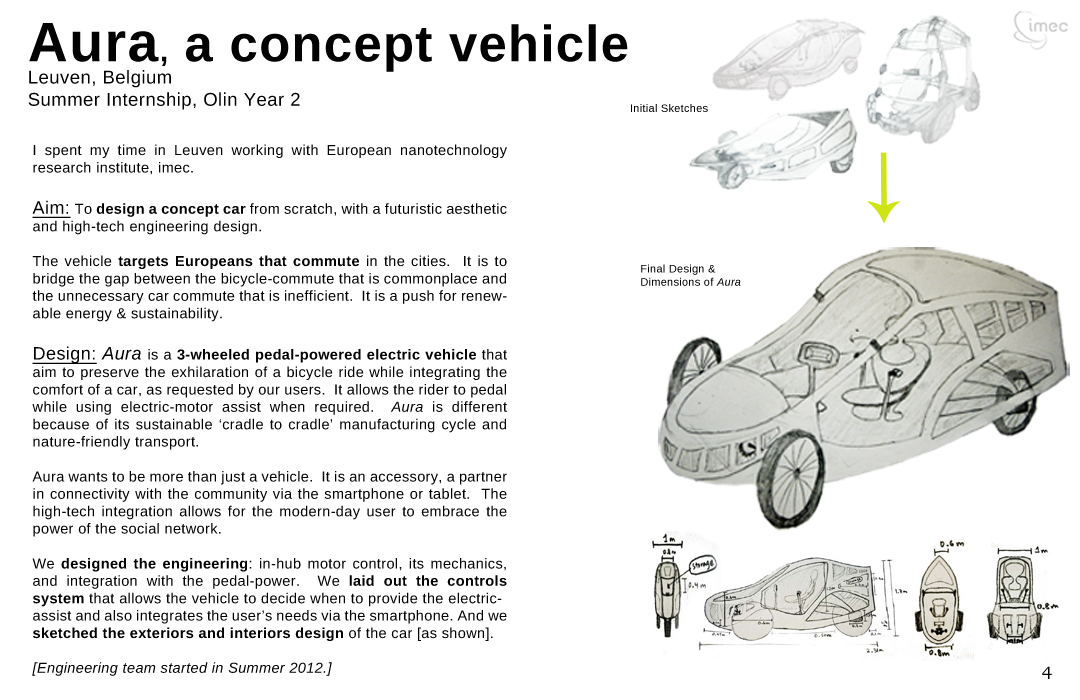
<style>
.page{position:relative;width:1080px;height:700px;background:#ffffff}
.page>*{position:absolute;margin:0}
.t1{font:18.5px "LiberationSans";letter-spacing:0.025em;color:#020202}
.t2{font:55.6px "LiberationSans-Bold";letter-spacing:0.025em;color:#020202}
.t3{font:30.9px "LiberationSans-Bold";letter-spacing:0.025em;color:#020202}
.t4{font:50.9px "LiberationSans-Bold";letter-spacing:0.025em;color:#020202}
.t5{font:11px "LiberationSans";letter-spacing:0.025em;color:#020202}
.t6{font:14.5px "LiberationSans";letter-spacing:0.025em;color:#020202}
.t7{font:18px "LiberationSans";letter-spacing:0.025em;color:#020202;text-decoration:underline}
.t8{font:14.5px "LiberationSans-Bold";letter-spacing:0.025em;color:#020202}
.t9{font:18px "LiberationSans-Italic";letter-spacing:0.025em;color:#020202}
.t10{font:14.5px "LiberationSans-Italic";letter-spacing:0.025em;color:#020202}
.t11{font:11px "LiberationSans-Italic";letter-spacing:0.025em;color:#020202}
.t12{font:18px "BookmanOldStyle";letter-spacing:0.025em;color:#000000}
</style>
<div class="page">
<p class="t1" style="left:28px;top:23px;width:600px;height:87px;text-align:justify"><span class="t2">Aura</span><span class="t3">,</span><span class="t4"> a concept vehicle<br></span>Leuven, Belgium<br>Summer Internship, Olin Year 2</p>
<p class="t5" style="left:631px;top:104px;width:77px;height:8px">Initial Sketches</p>
<p class="t6" style="left:32px;top:144px;width:475px;height:532px;text-align:justify">I spent my time in Leuven working with European nanotechnology research institute, imec.<br><br><span class="t7">Aim: </span>To <span class="t8">design a concept car</span> from scratch, with a futuristic aesthetic and high-tech engineering design.  <br><br>The vehicle <span class="t8">targets Europeans that commute</span> in the cities.  It is to bridge the gap between the bicycle-commute that is commonplace and the unnecessary car commute that is inefficient.  It is a push for renewable energy &amp; sustainability.<br><br><span class="t7">Design: </span><span class="t9">Aura </span>is a <span class="t8">3-wheeled pedal-powered electric vehicle</span> that aim to preserve the exhilaration of a bicycle ride while integrating the comfort of a car, as requested by our users.  It allows the rider to pedal while using electric-motor assist when required.  <span class="t10">Aura</span> is different because of its sustainable ‘cradle to cradle’ manufacturing cycle and nature-friendly transport.<br><br>Aura wants to be more than just a vehicle.  It is an accessory, a partner in connectivity with the community via the smartphone or tablet.  The high-tech integration allows for the modern-day user to embrace the power of the social network.<br><br>We <span class="t8">designed the engineering</span>: in-hub motor control, its mechanics, and integration with the pedal-power.  We <span class="t8">laid out the controls system</span> that allows the vehicle to decide when to provide the electric-assist and also integrates the user’s needs via the smartphone. And we <span class="t8">sketched the exteriors and interiors design</span> of the car [as shown].<br><br><span class="t10">[Engineering team started in Summer 2012.]</span></p>
<p class="t5" style="left:641px;top:264px;width:100px;height:22px;text-align:justify">Final Design &amp; <br>Dimensions of <span class="t11">Aura</span></p>
<p class="t12" style="left:1042px;top:666px;width:10px;height:13px">4</p>
</div>
